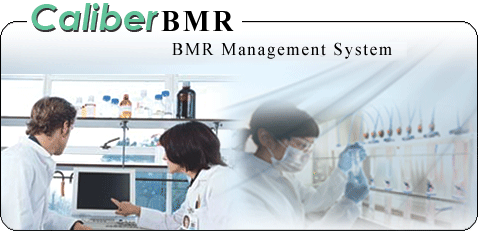
<style>
.page{position:relative;width:478px;height:231px}
.page>*{position:absolute;margin:0}
.t1{font:30px "TimesNewRomanPS-BoldMT";letter-spacing:0.1em;color:#000000;scale:0.95 1}
.t2{font:18px "TimesNewRomanPSMT";letter-spacing:0.1em;color:#000000;scale:0.95 1}
</style>
<div class="page">
<p class="t1" style="left:161px;top:11px;width:73px;height:20px">BMR</p>
<p class="t2" style="left:172px;top:42px;width:220px;height:17px">BMR Management System</p>
</div>
